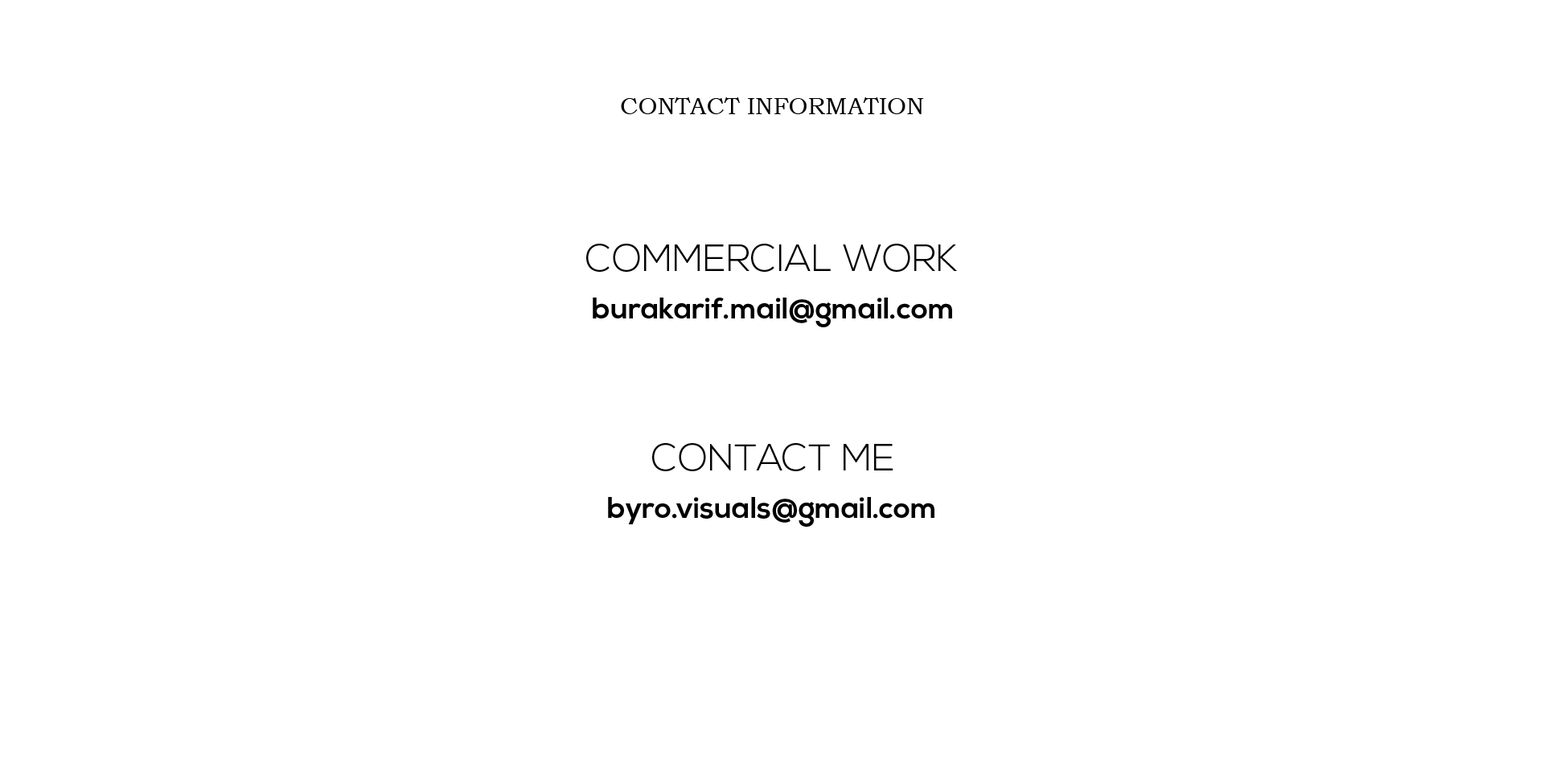
<style>
.page{position:relative;width:1544px;height:772px;background:#ffffff}
.page>*{position:absolute;margin:0}
.t1{font:24.1px "BookmanOldStyle";color:#000000}
.t2{font:37.5px "NexaLight";color:#000000}
.t3{font:29.5px "NexaBold";color:#000000}
</style>
<div class="page">
<p class="t1" style="left:621px;top:97px;width:303px;height:17px">CONTACT INFORMATION</p>
<p class="t2" style="left:586px;top:244px;width:371px;height:28px">COMMERCIAL WORK</p>
<p class="t3" style="left:593px;top:298px;width:359px;height:29px">burakarif.mail@gmail.com</p>
<p class="t2" style="left:652px;top:443px;width:241px;height:28px">CONTACT ME</p>
<p class="t3" style="left:608px;top:497px;width:327px;height:30px">byro.visuals@gmail.com</p>
</div>
